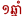
<style>
.page{position:relative;width:25px;height:16px;background:#ffffff}
.page>*{position:absolute;margin:0}
.t1{font:12px "Kh-Battambang";color:#a30000}
</style>
<div class="page">
<p class="t1" style="left:2px;top:0px;width:20px;height:18px">១ឆ្នាំ</p>
</div>
